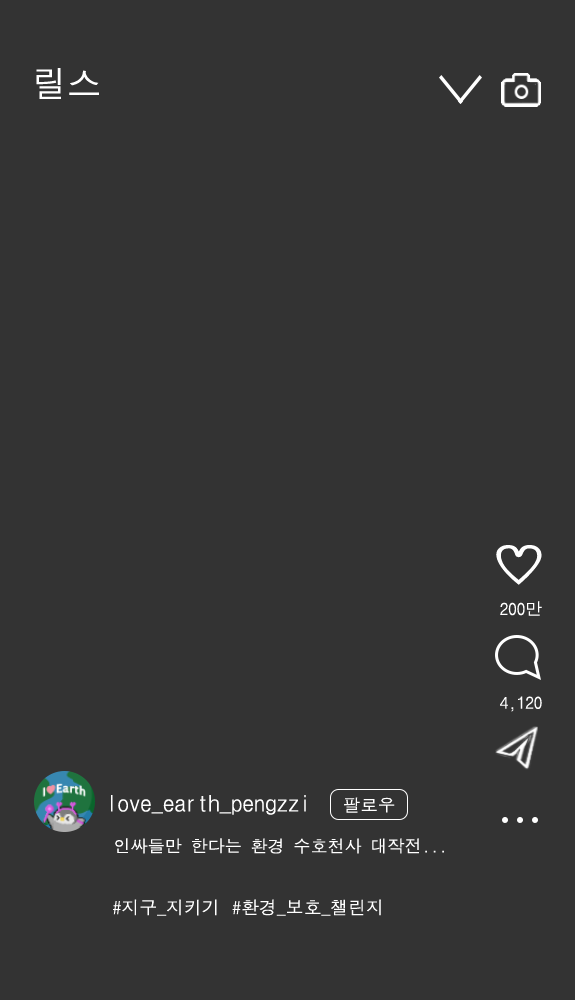
<style>
.page{position:relative;width:575px;height:1000px;background:#333333}
.page>*{position:absolute;margin:0}
.t1{font:35.5px "DotumChe";color:#ffffff}
.t2{font:45.9px "DotumChe";color:#ffffff;scale:1.25 1}
.t3{font:17px "DotumChe";color:#ffffff}
.t4{font:22.7px "DotumChe";color:#ffffff}
.t5{font:17.4px "DotumChe";color:#ffffff}
.t6{font:17.1px "DotumChe";color:#ffffff}
.t7{font:17.9px "DotumChe";color:#ffffff}
</style>
<div class="page">
<p class="t1" style="left:36px;top:68px;width:63px;height:31px">릴스</p>
<p class="t2" style="left:496px;top:545px;width:46px;height:40px">♡</p>
<p class="t3" style="left:500px;top:601px;width:42px;height:15px">200만</p>
<p class="t3" style="left:500px;top:696px;width:42px;height:16px">4,120</p>
<p class="t4" style="left:111px;top:795px;width:195px;height:20px">love_earth_pengzzi</p>
<p class="t5" style="left:344px;top:797px;width:51px;height:16px">팔로우</p>
<p class="t6" style="left:115px;top:838px;width:329px;height:16px">인싸들만 한다는 환경 수호천사 대작전...</p>
<p class="t7" style="left:113px;top:899px;width:104px;height:17px">#지구_지키기</p>
<p class="t7" style="left:232px;top:899px;width:149px;height:17px">#환경_보호_챌린지</p>
</div>
